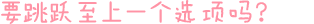
<style>
.page{position:relative;width:314px;height:24px;background:#ffffff}
.page>*{position:absolute;margin:0}
.t1{font:28px "¢è?";color:#ff93a5}
</style>
<div class="page">
<p class="t1" style="left:1px;top:0px;width:266px;height:24px">要跳跃至上一个选项吗？</p>
</div>
